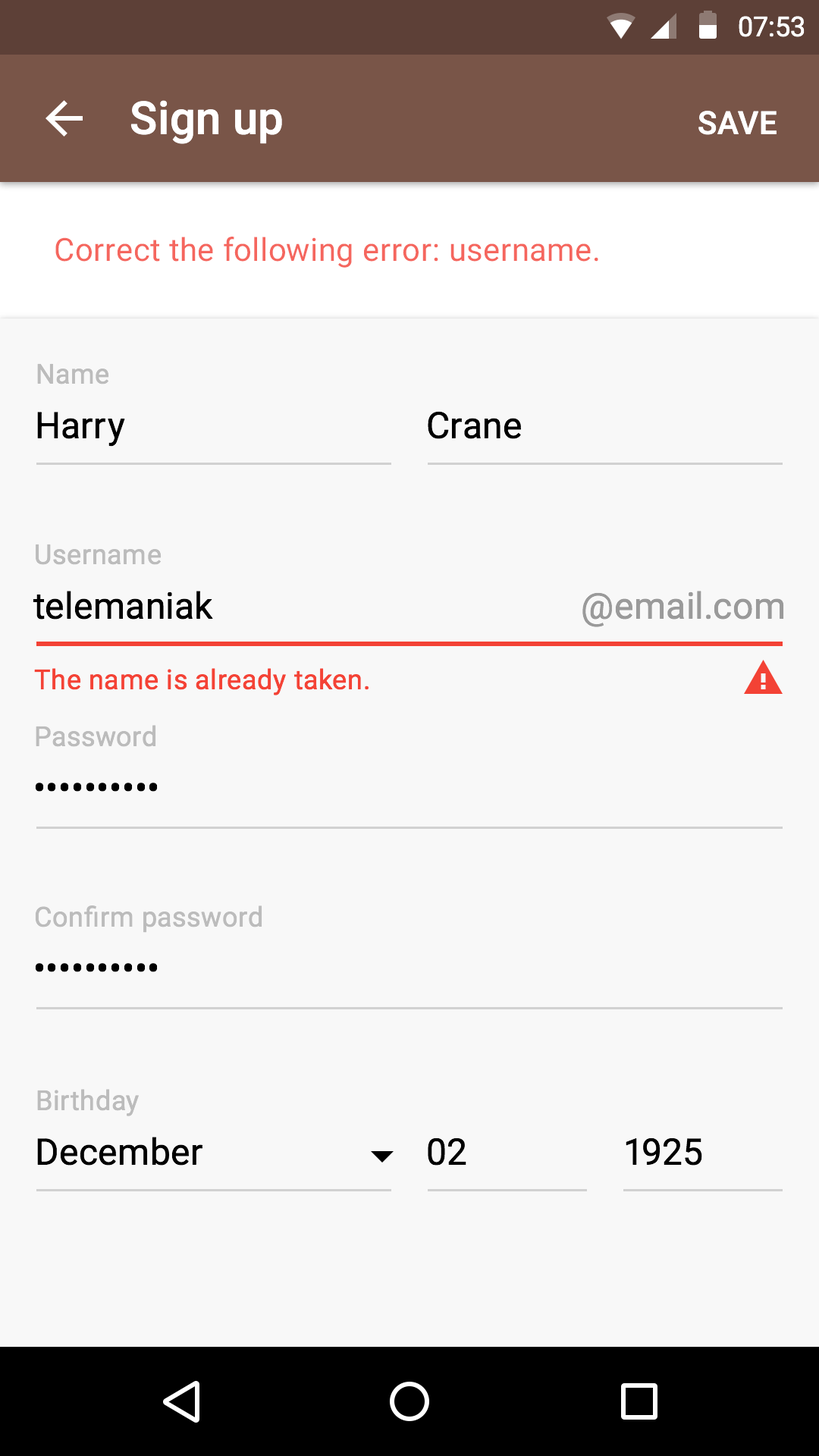
<style>
.page{position:relative;width:819px;height:1456px;background:#f8f8f8}
.page>*{position:absolute;margin:0}
.t1{font:27.3px "Roboto-Regular";color:#ffffff}
.t2{font:45.5px "Roboto-Medium";letter-spacing:0.005em;color:#ffffff}
.t3{font:31.8px "Roboto-Medium";letter-spacing:0.01em;color:#ffffff;text-transform:uppercase}
.t4{font:31.8px "Roboto-Regular";letter-spacing:0.01em;color:#f5665e}
.t5{font:27.3px "Roboto-Regular";letter-spacing:0.02em;color:#bcbcbc}
.t6{font:36.4px "Roboto-Regular";letter-spacing:0.01em;color:#000000}
.t7{font:36.4px "Roboto-Regular";letter-spacing:0.01em;color:#9a9a9a}
.t8{font:27.3px "Roboto-Regular";letter-spacing:0.02em;color:#f44336}
</style>
<div class="page">
<p class="t1" style="left:739px;top:16px;width:66px;height:21px">07:53</p>
<p class="t2" style="left:130px;top:100px;width:152px;height:44px">Sign up</p>
<p class="t3" style="left:698px;top:111px;width:79px;height:24px">save</p>
<p class="t4" style="left:55px;top:237px;width:543px;height:31px">Correct the following error: username.</p>
<p class="t5" style="left:37px;top:363px;width:72px;height:21px">Name</p>
<p class="t6" style="left:37px;top:412px;width:88px;height:35px">Harry</p>
<p class="t6" style="left:428px;top:411px;width:93px;height:28px">Crane</p>
<p class="t5" style="left:36px;top:544px;width:126px;height:21px">Username</p>
<p class="t6" style="left:33px;top:591px;width:180px;height:29px">telemaniak</p>
<p class="t7" style="left:582px;top:591px;width:202px;height:36px">@email.com</p>
<p class="t8" style="left:34px;top:668px;width:335px;height:27px">The name is already taken.</p>
<p class="t5" style="left:36px;top:725px;width:120px;height:22px">Password</p>
<p class="t6" style="left:35px;top:783px;width:123px;height:9px">••••••••••</p>
<p class="t5" style="left:35px;top:905px;width:227px;height:28px">Confirm password</p>
<p class="t6" style="left:35px;top:963px;width:123px;height:9px">••••••••••</p>
<p class="t5" style="left:37px;top:1089px;width:102px;height:27px">Birthday</p>
<p class="t6" style="left:37px;top:1137px;width:165px;height:29px">December</p>
<p class="t6" style="left:428px;top:1137px;width:38px;height:29px">02</p>
<p class="t6" style="left:626px;top:1137px;width:76px;height:29px">1925</p>
</div>
